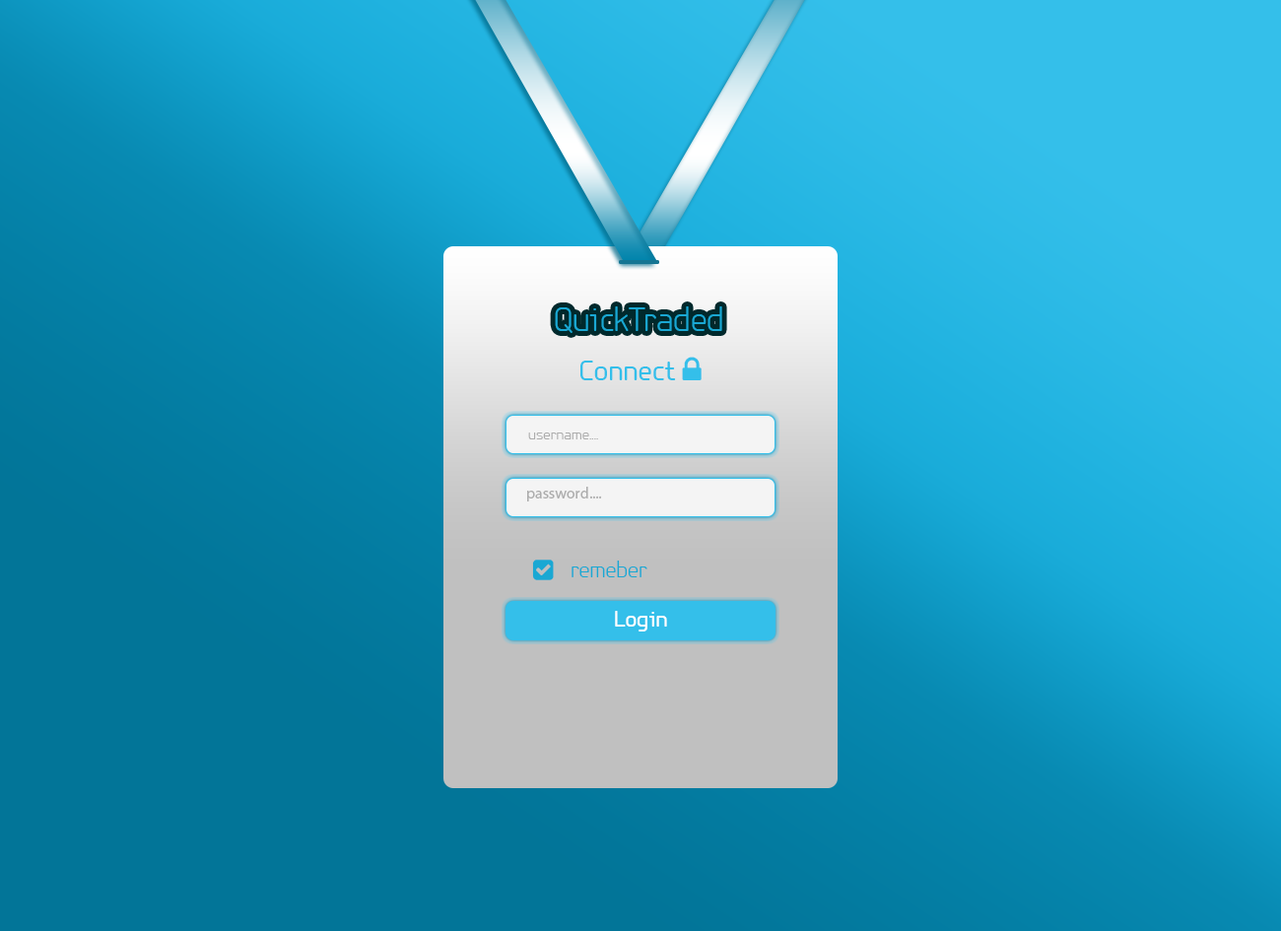
<style>
.page{position:relative;width:1281px;height:931px}
.page>*{position:absolute;margin:0}
.t1{font:35.5px "PFIsotextPro-Light";color:#1aa8d3}
.t2{font:15.8px "PFIsotextPro-Light";color:#adadad}
.t3{font:15.8px "MyriadPro-Regular";color:#adadad}
.t4{font:23.6px "PFIsotextPro-Light";color:#1aa8d3}
.t5{font:23.6px "PFIsotextPro-Regular";color:#ffffff}
</style>
<div class="page">
<p class="t1" style="left:555px;top:306px;width:167px;height:27px">QuickTraded</p>
<p class="t2" style="left:528px;top:433px;width:70px;height:6px">....username</p>
<p class="t3" style="left:527px;top:487px;width:75px;height:14px">....password</p>
<p class="t4" style="left:571px;top:561px;width:76px;height:16px">remeber</p>
<p class="t5" style="left:615px;top:611px;width:52px;height:21px">Login</p>
</div>
